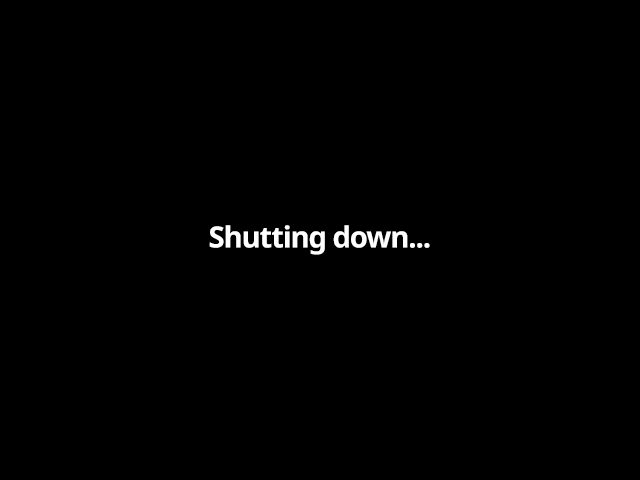
<style>
.page{position:relative;width:640px;height:480px;background:#000000}
.page>*{position:absolute;margin:0}
.t1{font:29.3px "NotoSans-Bold";letter-spacing:-0.04em;color:#ffffff}
</style>
<div class="page">
<p class="t1" style="left:209px;top:225px;width:221px;height:30px">Shutting down...</p>
</div>
